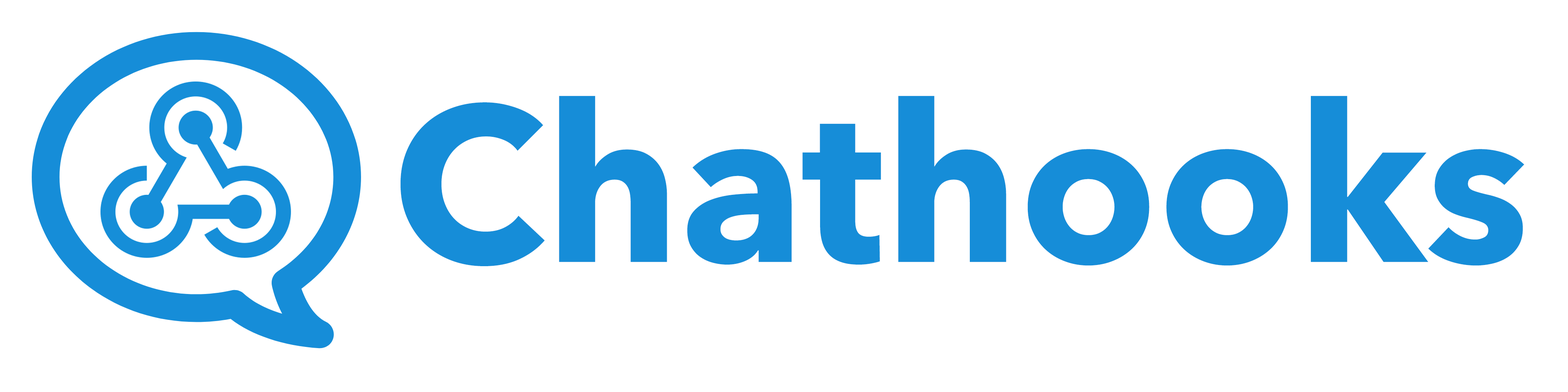
<style>
.page{position:relative;width:1568px;height:392px;background:#ffffff}
.page>*{position:absolute;margin:0}
.t1{font:219.5px "AvenirNext-Bold";color:#168dd8}
</style>
<div class="page">
<p class="t1" style="left:400px;top:96px;width:1124px;height:170px">Chathooks</p>
</div>
